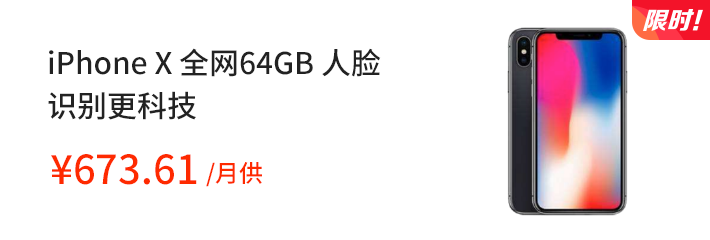
<style>
.page{position:relative;width:710px;height:240px;background:#ffffff}
.page>*{position:absolute;margin:0}
.t1{font:30px/40px "SourceHanSansCN-Medium";color:#222222}
.t2{font:40px "SourceHanSansCN-Medium";color:#fe2a00}
.t3{font:24px "SourceHanSansCN-Medium";color:#fe2a00}
</style>
<div class="page">
<p class="t1" style="left:48px;top:48px;width:333px;height:72px">iPhone X 全网64GB 人脸<br>识别更科技</p>
<p class="t2" style="left:51px;top:154px;width:146px;height:31px">¥673.61</p>
<p class="t3" style="left:206px;top:162px;width:56px;height:25px">/月供</p>
</div>
